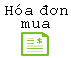
<style>
.page{position:relative;width:71px;height:58px;background:#ffffff}
.page>*{position:absolute;margin:0}
.t1{font:12px/13.3px "CourierNewPSMT";color:#000000}
</style>
<div class="page">
<p class="t1" style="left:5px;top:4px;width:63px;height:24px;text-align:center">Hóa đơn<br>mua</p>
</div>
